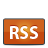
<style>
.page{position:relative;width:48px;height:48px;background:#ffffff}
.page>*{position:absolute;margin:0}
.t1{font:18.1px "MyriadPro-Bold"}
.t2{font:18.1px "MyriadPro-Bold";color:#ffffff}
</style>
<div class="page">
<p class="t1" style="left:10px;top:25px;width:28px;height:13px">RSS</p>
<p class="t2" style="left:10px;top:26px;width:28px;height:13px">RSS</p>
</div>
